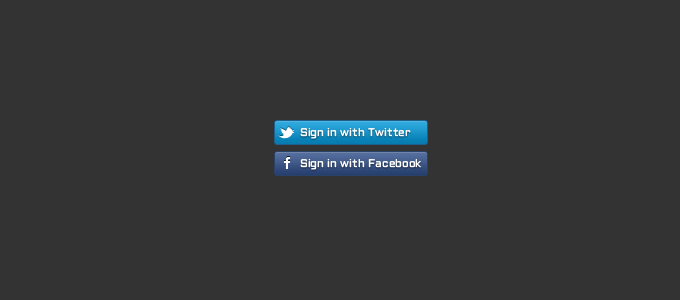
<style>
.page{position:relative;width:680px;height:300px;background:#333333}
.page>*{position:absolute;margin:0}
.t1{font:11px "Aldrich";color:#ffffff}
</style>
<div class="page">
<p class="t1" style="left:300px;top:128px;width:111px;height:11px">Sign in with Twitter</p>
<p class="t1" style="left:300px;top:159px;width:122px;height:11px">Sign in with Facebook</p>
</div>
